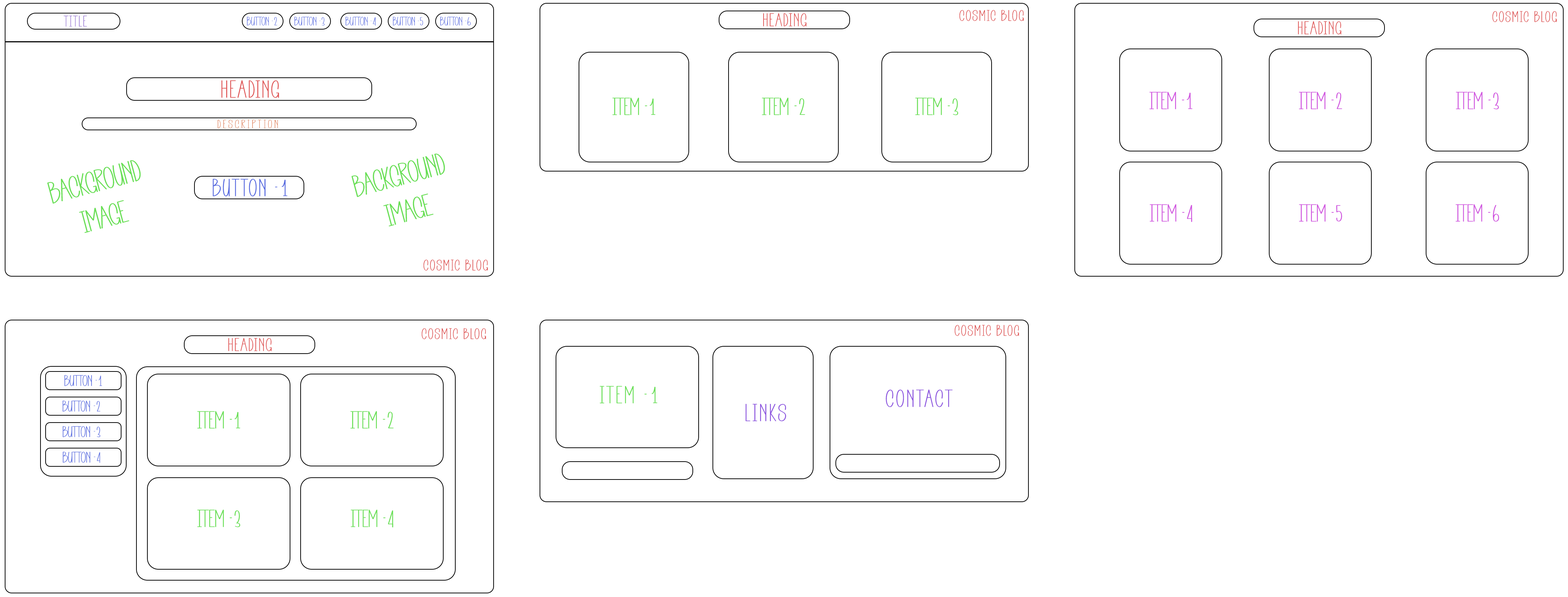
<style>
.page{position:relative;width:1568px;height:597px;background:#ffffff}
.page>*{position:absolute;margin:0}
.t1{font:15.2px "BirthdayPartyRegular";letter-spacing:0.075em;color:#9472d2}
.t2{font:12.2px "BirthdayPartyRegular";color:#5468df}
.t3{font:18.2px "BirthdayPartyRegular";letter-spacing:0.075em;color:#df5454}
.t4{font:15.2px "BirthdayPartyRegular";letter-spacing:0.1em;color:#db4141}
.t5{font:24.3px "BirthdayPartyRegular";letter-spacing:0.075em;color:#df5454}
.t6{font:24.3px "BirthdayPartyRegular";color:#68df54}
.t7{font:24.3px "BirthdayPartyRegular";color:#d054df}
.t8{font:12.2px "BirthdayPartyRegular";letter-spacing:0.2em;color:#df7e54}
.t9{font:30.5px "BirthdayPartyRegular";color:#68df54}
.t10{font:24.3px "BirthdayPartyRegular";letter-spacing:0.075em;color:#5468df}
.t11{font:15.2px "BirthdayPartyRegular";color:#5468df}
.t12{font:24.3px "BirthdayPartyRegular";letter-spacing:0.1em;color:#68df54}
.t13{font:24.3px "BirthdayPartyRegular";letter-spacing:0.1em;color:#8c54df}
</style>
<div class="page">
<p class="t1" style="left:63px;top:16px;width:24px;height:11px">TITLE</p>
<p class="t2" style="left:247px;top:17px;width:30px;height:9px">BUTTON -2</p>
<p class="t2" style="left:294px;top:17px;width:31px;height:9px">BUTTON -3</p>
<p class="t2" style="left:345px;top:17px;width:31px;height:9px">BUTTON -4</p>
<p class="t2" style="left:393px;top:17px;width:30px;height:9px">BUTTON -5</p>
<p class="t2" style="left:440px;top:17px;width:31px;height:9px">BUTTON -6</p>
<p class="t3" style="left:763px;top:13px;width:44px;height:14px">HEADING</p>
<p class="t4" style="left:959px;top:10px;width:65px;height:11px">COSMIC BLOG</p>
<p class="t4" style="left:1492px;top:11px;width:65px;height:11px">COSMIC BLOG</p>
<p class="t3" style="left:1298px;top:21px;width:43px;height:14px">HEADING</p>
<p class="t5" style="left:221px;top:80px;width:58px;height:18px">HEADING</p>
<p class="t6" style="left:612px;top:97px;width:44px;height:18px">ITEM -1</p>
<p class="t6" style="left:762px;top:97px;width:43px;height:18px">ITEM -2</p>
<p class="t6" style="left:915px;top:97px;width:43px;height:18px">ITEM -3</p>
<p class="t7" style="left:1149px;top:92px;width:44px;height:17px">ITEM -1</p>
<p class="t7" style="left:1299px;top:92px;width:43px;height:17px">ITEM -2</p>
<p class="t7" style="left:1456px;top:92px;width:43px;height:17px">ITEM -3</p>
<p class="t8" style="left:217px;top:120px;width:61px;height:8px">DESCRIPTION</p>
<p class="t9" style="left:47px;top:160px;width:94px;height:73px;text-align:center;rotate:-15deg">BACKGROUND<br>IMAGE</p>
<p class="t9" style="left:351px;top:154px;width:94px;height:73px;text-align:center;rotate:-15deg">BACKGROUND<br>IMAGE</p>
<p class="t10" style="left:213px;top:179px;width:74px;height:17px">BUTTON -1</p>
<p class="t7" style="left:1150px;top:204px;width:42px;height:18px">ITEM -4</p>
<p class="t7" style="left:1299px;top:204px;width:43px;height:18px">ITEM -5</p>
<p class="t7" style="left:1456px;top:204px;width:43px;height:18px">ITEM -6</p>
<p class="t4" style="left:423px;top:259px;width:65px;height:12px">COSMIC BLOG</p>
<p class="t4" style="left:421px;top:328px;width:65px;height:11px">COSMIC BLOG</p>
<p class="t4" style="left:954px;top:325px;width:65px;height:11px">COSMIC BLOG</p>
<p class="t3" style="left:228px;top:338px;width:44px;height:13px">HEADING</p>
<p class="t11" style="left:64px;top:375px;width:38px;height:11px">BUTTON -1</p>
<p class="t12" style="left:600px;top:386px;width:57px;height:17px">ITEM -1</p>
<p class="t13" style="left:886px;top:389px;width:67px;height:18px">CONTACT</p>
<p class="t11" style="left:62px;top:401px;width:38px;height:11px">BUTTON -2</p>
<p class="t6" style="left:197px;top:411px;width:43px;height:18px">ITEM -1</p>
<p class="t6" style="left:350px;top:411px;width:44px;height:18px">ITEM -2</p>
<p class="t13" style="left:745px;top:403px;width:41px;height:18px">LINKS</p>
<p class="t11" style="left:63px;top:426px;width:37px;height:11px">BUTTON -3</p>
<p class="t11" style="left:63px;top:452px;width:37px;height:11px">BUTTON -4</p>
<p class="t6" style="left:197px;top:509px;width:43px;height:18px">ITEM -3</p>
<p class="t6" style="left:351px;top:509px;width:42px;height:19px">ITEM -4</p>
</div>
